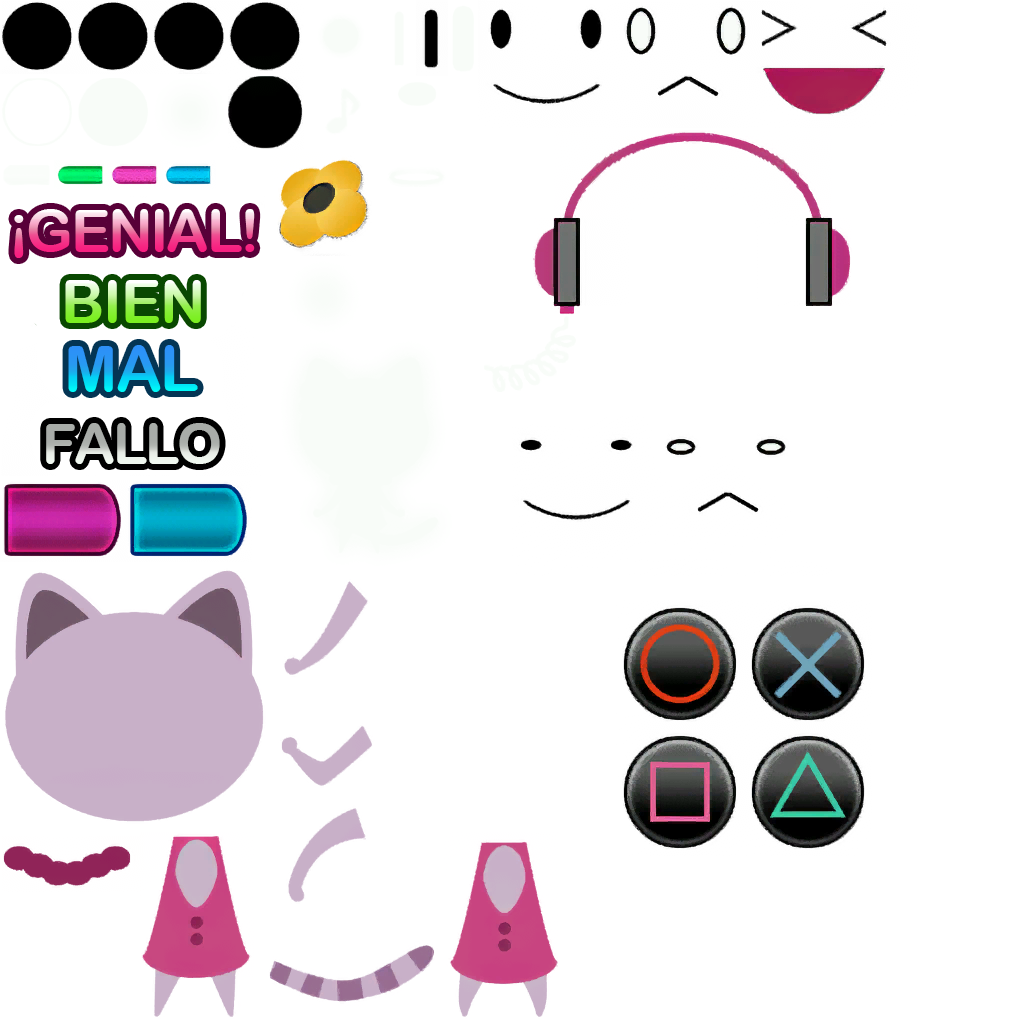
<style>
.page{position:relative;width:1024px;height:1024px;background:#ffffff}
.page>*{position:absolute;margin:0}
.t1{font:59px "ArialRoundedMTBold";letter-spacing:-0.04em}
.t2{font:60px "ArialRoundedMTBold";letter-spacing:-0.02em}
.t3{font:62.8px "ArialRoundedMTBold";letter-spacing:-0.02em}
.t4{font:55.5px "ArialRoundedMTBold";letter-spacing:-0.04em}
</style>
<div class="page">
<p class="t1" style="left:28px;top:209px;width:227px;height:43px">GENIAL!</p>
<p class="t1" style="left:14px;top:215px;width:10px;height:43px">¡</p>
<p class="t2" style="left:65px;top:280px;width:136px;height:43px">BIEN</p>
<p class="t3" style="left:68px;top:345px;width:130px;height:47px">MAL</p>
<p class="t4" style="left:46px;top:423px;width:174px;height:41px">FALLO</p>
</div>
